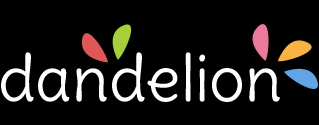
<style>
.page{position:relative;width:319px;height:125px;background:#000000}
.page>*{position:absolute;margin:0}
.t1{font:64px "Delius-Regular";color:#ffffff}
</style>
<div class="page">
<p class="t1" style="left:1px;top:52px;width:279px;height:50px">dandelion</p>
</div>
